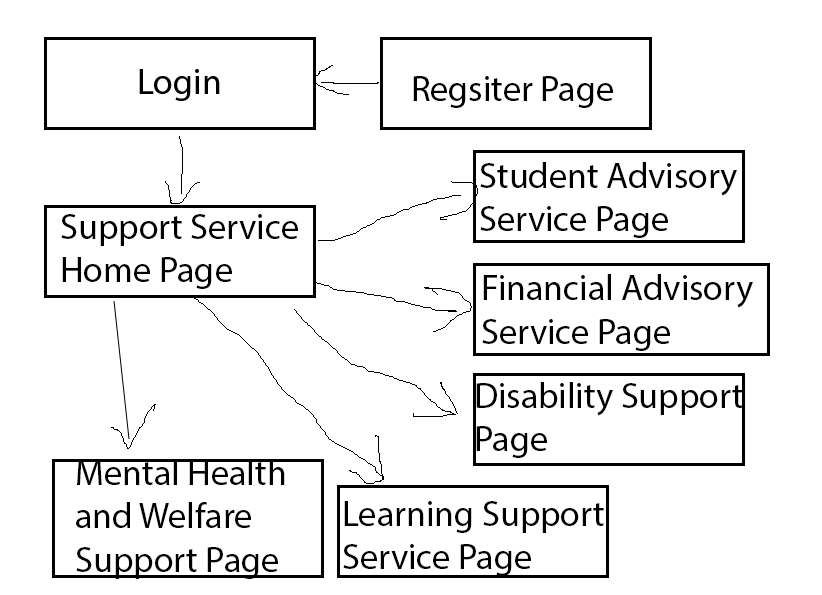
<style>
.page{position:relative;width:822px;height:595px;background:#ffffff}
.page>*{position:absolute;margin:0}
.t1{font:36px "MyriadPro-Regular";color:#000000}
</style>
<div class="page">
<p class="t1" style="left:413px;top:76px;width:200px;height:32px">Regsiter Page</p>
<p class="t1" style="left:480px;top:162px;width:257px;height:76px">Student Advisory<br>Service Page</p>
<p class="t1" style="left:61px;top:214px;width:237px;height:75px">Support Service<br>Home Page</p>
<p class="t1" style="left:482px;top:274px;width:271px;height:77px">Financial Advisory<br>Service Page</p>
<p class="t1" style="left:476px;top:382px;width:267px;height:76px">Disability Support<br>Page</p>
<p class="t1" style="left:76px;top:459px;width:209px;height:120px">Mental Health<br>and Welfare<br>Support Page</p>
<p class="t1" style="left:343px;top:501px;width:261px;height:75px">Learning Support<br>Service Page</p>
</div>
